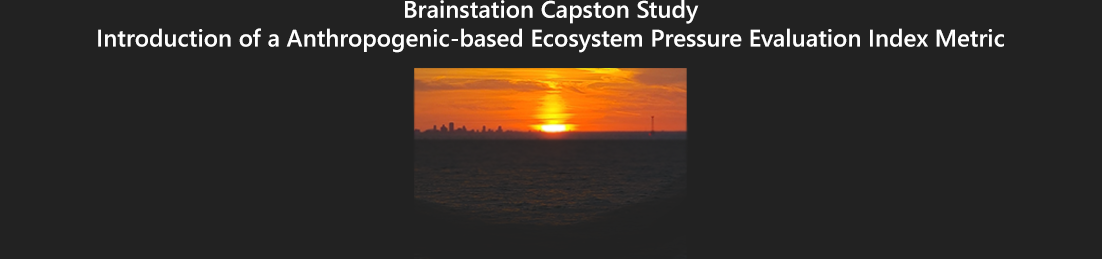
<style>
.page{position:relative;width:1102px;height:259px;background:#222222}
.page>*{position:absolute;margin:0}
.t1{font:24px "SegoeUI-Semibold";color:#ffffff}
</style>
<div class="page">
<p class="t1" style="left:98px;top:0px;width:906px;height:53px;text-align:center">Brainstation Capston Study<br>Introduction of a Anthropogenic-based Ecosystem Pressure Evaluation Index Metric</p>
</div>
